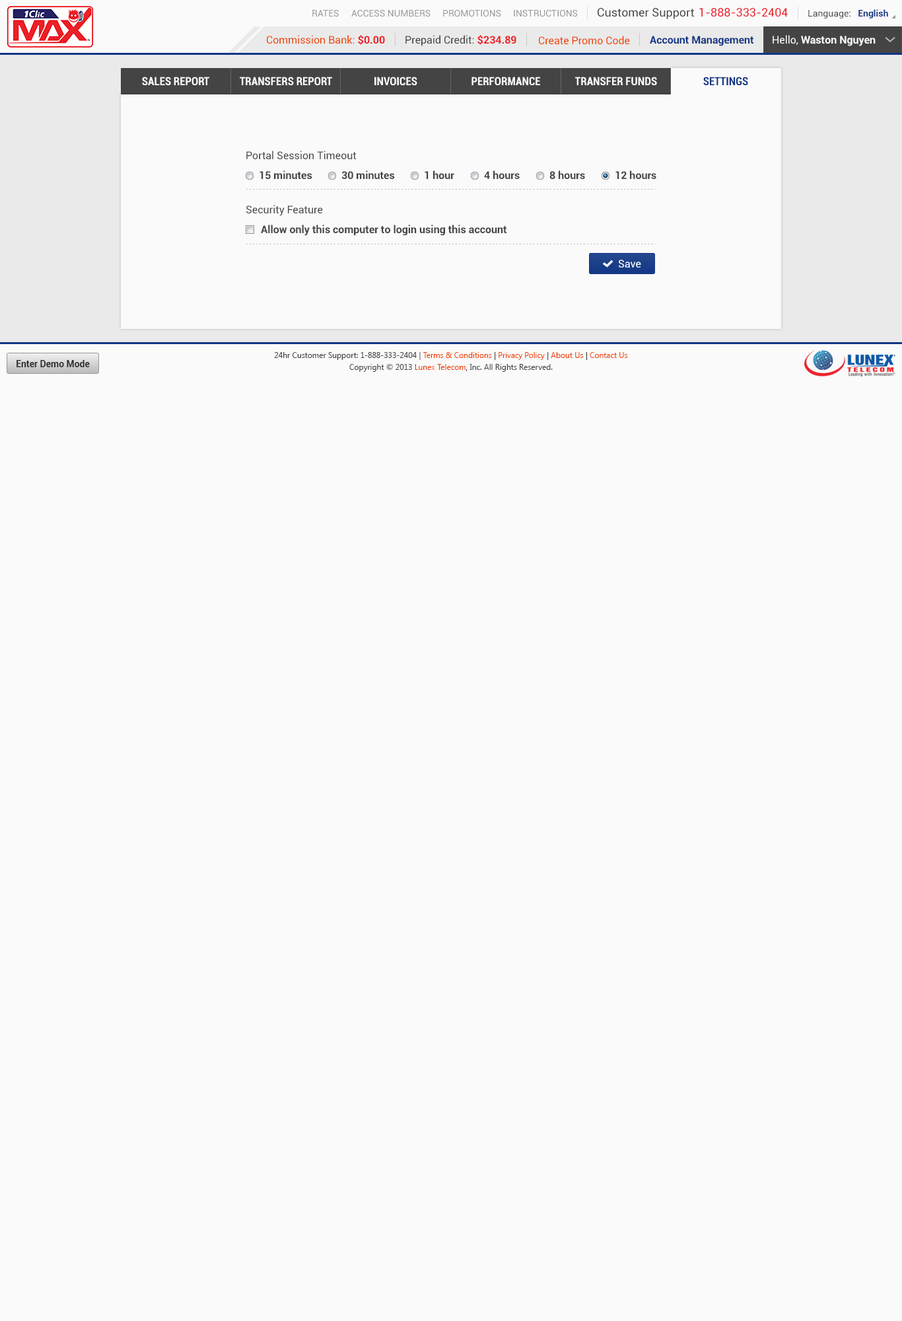
<style>
.page{position:relative;width:902px;height:1321px;background:#fafafa}
.page>*{position:absolute;margin:0}
.t1{font:9.2px "Roboto-Regular";color:#999999}
.t2{font:11.6px "Roboto-Regular";color:#444444}
.t3{font:11.6px "Roboto-Regular";color:#ec2029}
.t4{font:9.2px "Roboto-Regular";color:#444444}
.t5{font:9.2px "Roboto-Bold";color:#123785}
.t6{font:10.6px "Roboto-Regular";color:#ee4400}
.t7{font:10.6px "Roboto-Bold";color:#ec2028}
.t8{font:10.6px "Roboto-Regular";color:#444444}
.t9{font:10.6px "Roboto-Bold";color:#123785}
.t10{font:10.6px "Roboto-Bold";color:#fafafa}
.t11{font:10.6px "Roboto-Regular";color:#fafafa}
.t12{font:11.2px "Roboto-BoldCondensed";color:#fafafa}
.t13{font:11.2px "Roboto-BoldCondensed";color:#123785}
.t14{font:10.6px "Roboto-Bold";color:#444444}
.t15{font:10.6px "Roboto-Regular";color:#ffffff}
.t16{font:7.9px/11.9px "SegoeUI";color:#444444}
.t17{font:7.9px/11.9px "SegoeUI";color:#ee4400}
.t18{font:7.9px/11.9px "SegoeUI";color:#333333}
.t19{font:9.2px "Roboto-Bold";color:#333333}
</style>
<div class="page">
<p class="t1" style="left:312px;top:10px;width:27px;height:7px">RATES</p>
<p class="t1" style="left:351px;top:10px;width:80px;height:7px">ACCESS NUMBERS</p>
<p class="t1" style="left:443px;top:10px;width:58px;height:7px">PROMOTIONS</p>
<p class="t1" style="left:514px;top:10px;width:64px;height:7px">INSTRUCTIONS</p>
<p class="t2" style="left:598px;top:8px;width:96px;height:11px">Customer Support</p>
<p class="t3" style="left:700px;top:8px;width:88px;height:9px">1-888-333-2404</p>
<p class="t4" style="left:809px;top:9px;width:80px;height:9px">Language:   <span class="t5">English</span></p>
<p class="t6" style="left:267px;top:35px;width:118px;height:10px">Commission Bank: <span class="t7">$0.00</span></p>
<p class="t8" style="left:406px;top:35px;width:111px;height:11px">Prepaid Credit: <span class="t7">$234.89</span></p>
<p class="t6" style="left:539px;top:36px;width:91px;height:9px">Create Promo Code</p>
<p class="t9" style="left:650px;top:36px;width:104px;height:10px">Account Management</p>
<p class="t10" style="left:773px;top:35px;width:103px;height:11px"><span class="t11">Hello, </span>Waston Nguyen</p>
<p class="t12" style="left:142px;top:77px;width:67px;height:8px">SALES REPORT</p>
<p class="t12" style="left:240px;top:77px;width:92px;height:8px">TRANSFERS REPORT</p>
<p class="t12" style="left:375px;top:77px;width:43px;height:8px">INVOICES</p>
<p class="t12" style="left:472px;top:77px;width:68px;height:8px">PERFORMANCE</p>
<p class="t12" style="left:575px;top:77px;width:82px;height:8px">TRANSFER FUNDS</p>
<p class="t13" style="left:704px;top:77px;width:45px;height:8px">SETTINGS</p>
<p class="t8" style="left:246px;top:151px;width:111px;height:9px">Portal Session Timeout</p>
<p class="t14" style="left:260px;top:170px;width:52px;height:10px">15 minutes</p>
<p class="t14" style="left:342px;top:170px;width:53px;height:10px">30 minutes</p>
<p class="t14" style="left:425px;top:170px;width:30px;height:10px">1 hour</p>
<p class="t14" style="left:484px;top:170px;width:36px;height:10px">4 hours</p>
<p class="t14" style="left:550px;top:170px;width:35px;height:10px">8 hours</p>
<p class="t14" style="left:616px;top:170px;width:41px;height:10px">12 hours</p>
<p class="t8" style="left:246px;top:205px;width:77px;height:11px">Security Feature</p>
<p class="t14" style="left:261px;top:225px;width:246px;height:11px">Allow only this computer to login using this account</p>
<p class="t15" style="left:619px;top:260px;width:22px;height:8px">Save</p>
<p class="t16" style="left:274px;top:352px;width:354px;height:20px;text-align:center">24hr Customer Support: 1-888-333-2404 | <span class="t17">Terms &amp; Conditions</span><span class="t18"> | </span><span class="t17">Privacy Policy</span><span class="t18"> | </span><span class="t17">About Us</span><span class="t18"> | </span><span class="t17">Contact Us<br></span>Copyright © 2013 <span class="t17">Lunex Telecom</span><span class="t18">,</span> Inc. All Rights Reserved.</p>
<p class="t19" style="left:17px;top:360px;width:73px;height:7px">Enter Demo Mode</p>
</div>
